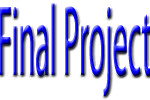
<style>
.page{position:relative;width:150px;height:100px;background:#ffffff}
.page>*{position:absolute;margin:0}
.t1{font:100.6px "MyriadPro-Regular";scale:0.3 1}
</style>
<div class="page">
<p class="t1" style="left:0px;top:3px;width:151px;height:94px">Final Project</p>
</div>
